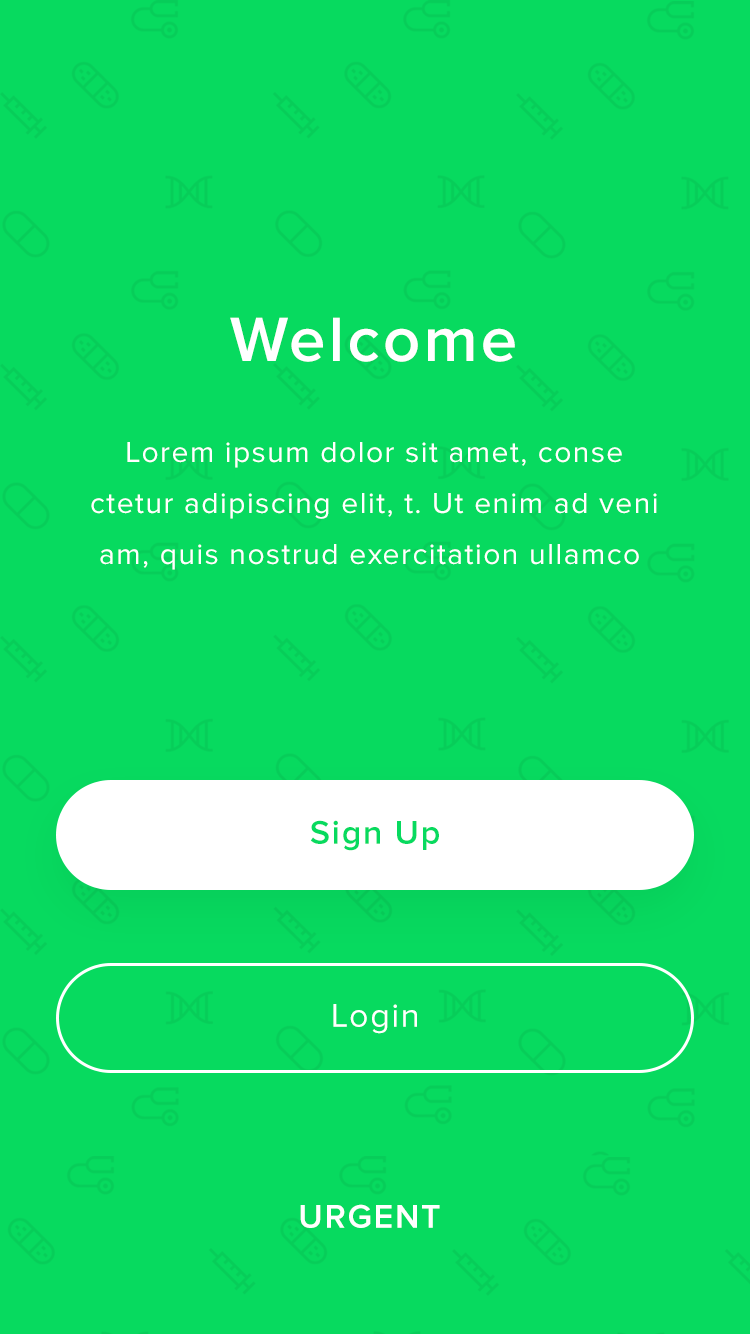
<style>
.page{position:relative;width:750px;height:1334px;background:#07da5f}
.page>*{position:absolute;margin:0}
.t1{font:65px "ProximaNova-Semibold";letter-spacing:0.05em;color:#ffffff}
.t2{font:30px/51px "ProximaNova-Regular";letter-spacing:0.05em;color:#ffffff}
.t3{font:34px "ProximaNova-Semibold";letter-spacing:0.05em;color:#07da5f}
.t4{font:34px "ProximaNova-Regular";letter-spacing:0.05em;color:#ffffff}
.t5{font:34px "ProximaNova-Semibold";letter-spacing:0.05em;color:#ffffff}
</style>
<div class="page">
<p class="t1" style="left:230px;top:317px;width:285px;height:45px">Welcome</p>
<p class="t2" style="left:91px;top:442px;width:566px;height:128px;text-align:center">Lorem ipsum dolor sit amet, conse<br>ctetur adipiscing elit, t. Ut enim ad veni<br>am, quis nostrud exercitation ullamco</p>
<p class="t3" style="left:310px;top:820px;width:129px;height:31px">Sign Up</p>
<p class="t4" style="left:333px;top:1004px;width:84px;height:30px">Login</p>
<p class="t5" style="left:300px;top:1204px;width:140px;height:24px">URGENT</p>
</div>
